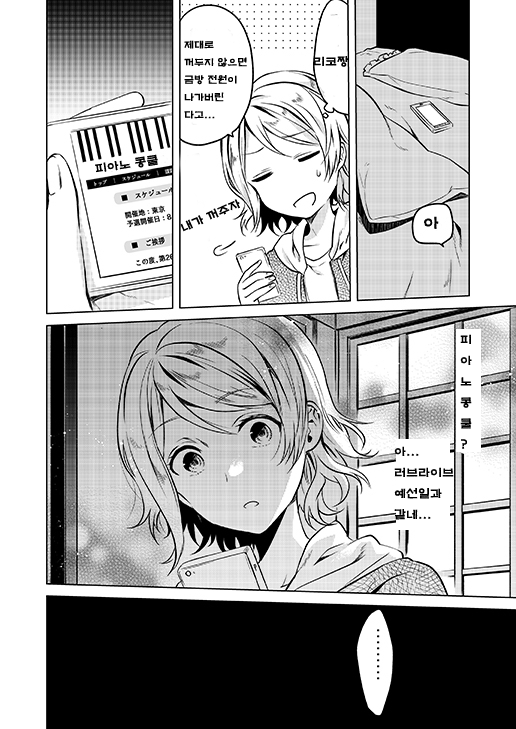
<style>
.page{position:relative;width:516px;height:729px;background:#ffffff}
.page>*{position:absolute;margin:0}
.t1{font:10px "H2mkpB";color:#000000}
.t2{font:12px "H2mkpB";color:#000000}
.t3{font:16px "H2mkpB";color:#010101}
</style>
<div class="page">
<p class="t1" style="left:184px;top:40px;width:63px;height:79px">제대로<br>꺼두지 않으면<br>금방 전원이<br>나가버린<br>다고...</p>
<p class="t2" style="left:313px;top:56px;width:36px;height:11px">리코짱</p>
<p class="t2" style="left:95px;top:154px;width:63px;height:19px;rotate:-8deg">피아노 콩쿨</p>
<p class="t2" style="left:180px;top:199px;width:60px;height:33px;rotate:-24deg">내가 꺼주자</p>
<p class="t3" style="left:424px;top:216px;width:15px;height:13px">아</p>
<p class="t2" style="left:460px;top:334px;width:12px;height:115px">피<br>아<br>노<br>콩<br>쿨<br>?</p>
<p class="t2" style="left:394px;top:446px;width:60px;height:74px">아...<br>러브라이브<br>예선일과<br>같네...<br>가</p>
</div>
